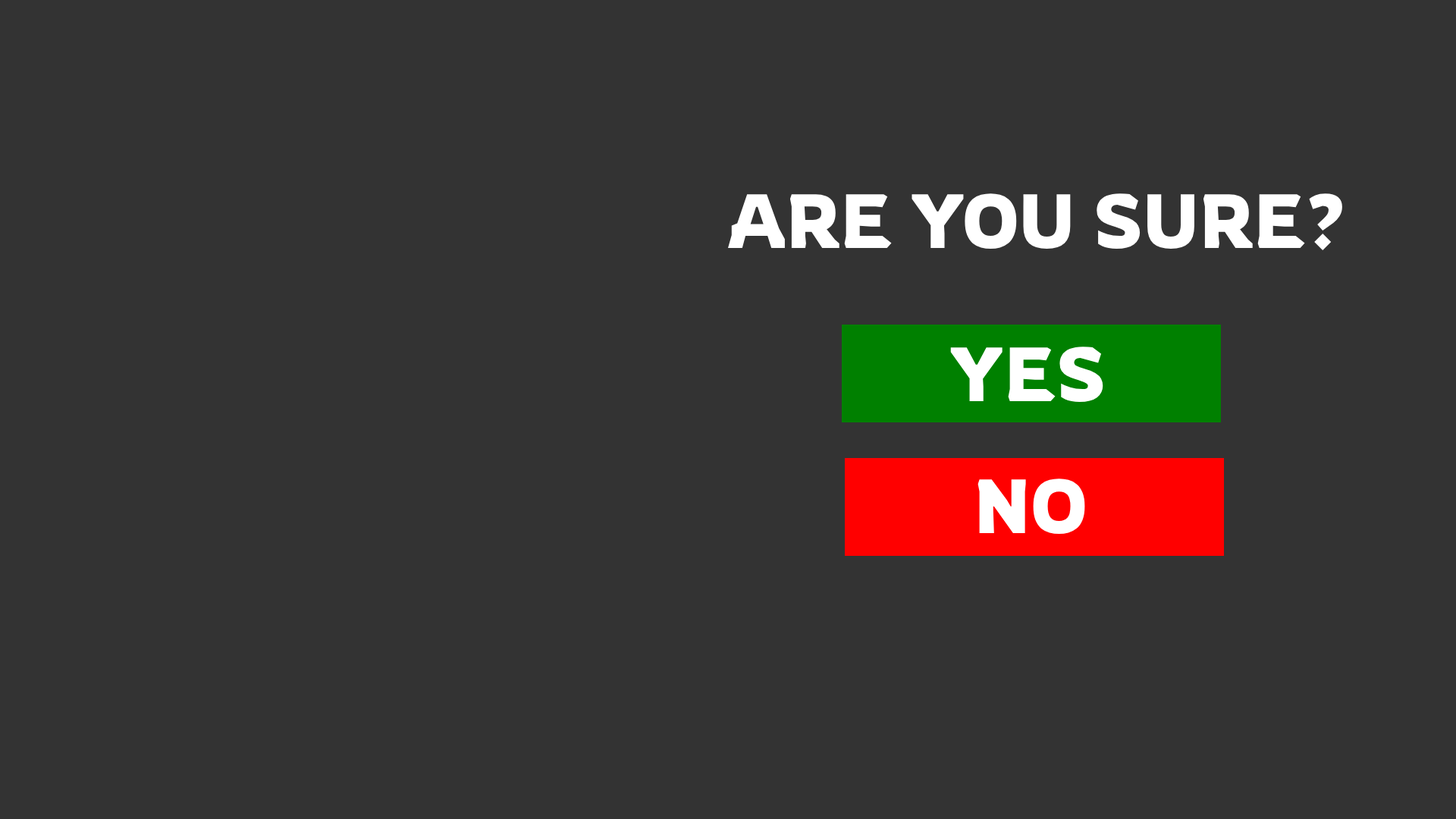
<style>
.page{position:relative;width:1456px;height:819px;background:#333333}
.page>*{position:absolute;margin:0}
.t1{font:75.8px "Rowdies-Regular";color:#ffffff}
</style>
<div class="page">
<p class="t1" style="left:728px;top:193px;width:614px;height:57px">ARE YOU SURE?</p>
<p class="t1" style="left:950px;top:347px;width:153px;height:55px">YES</p>
<p class="t1" style="left:977px;top:479px;width:108px;height:55px">NO</p>
</div>
